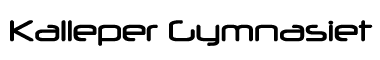
<style>
.page{position:relative;width:380px;height:60px;background:#ffffff}
.page>*{position:absolute;margin:0}
.t1{font:35px "Neuropol";color:#000000}
</style>
<div class="page">
<p class="t1" style="left:10px;top:20px;width:363px;height:26px">Kalleper Gymnasiet</p>
</div>
